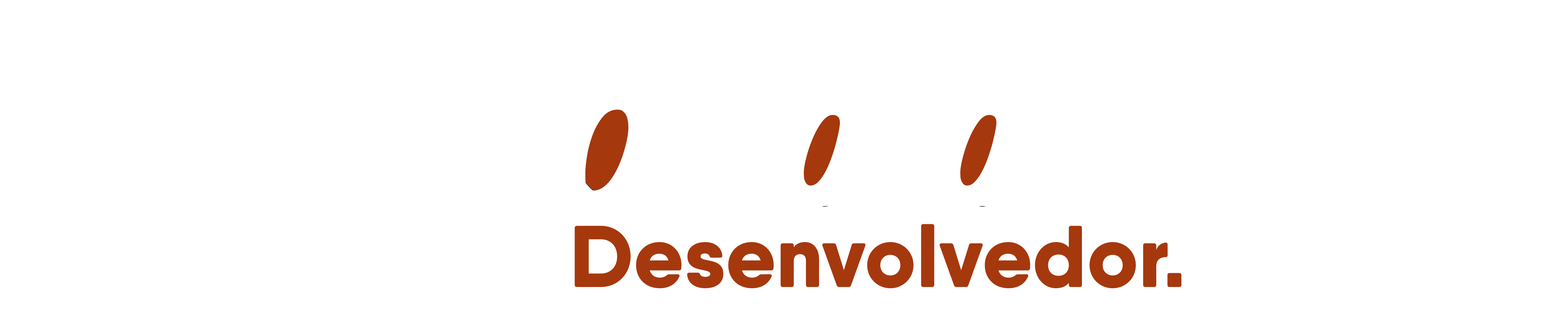
<style>
.page{position:relative;width:1568px;height:314px;background:#ffffff}
.page>*{position:absolute;margin:0}
.t1{font:87.3px "QanelasSoftDEMO-ExtraBold";color:#a6380d}
</style>
<div class="page">
<p class="t1" style="left:575px;top:224px;width:607px;height:64px">Desenvolvedor.</p>
</div>
